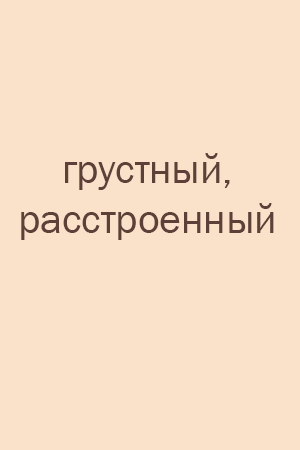
<style>
.page{position:relative;width:300px;height:450px;background:#f9e1ca}
.page>*{position:absolute;margin:0}
.t1{font:41.7px "FranklinGothic-Book";color:#5d4037}
</style>
<div class="page">
<p class="t1" style="left:21px;top:153px;width:253px;height:87px;text-align:center">грустный,<br>расстроенный</p>
</div>
